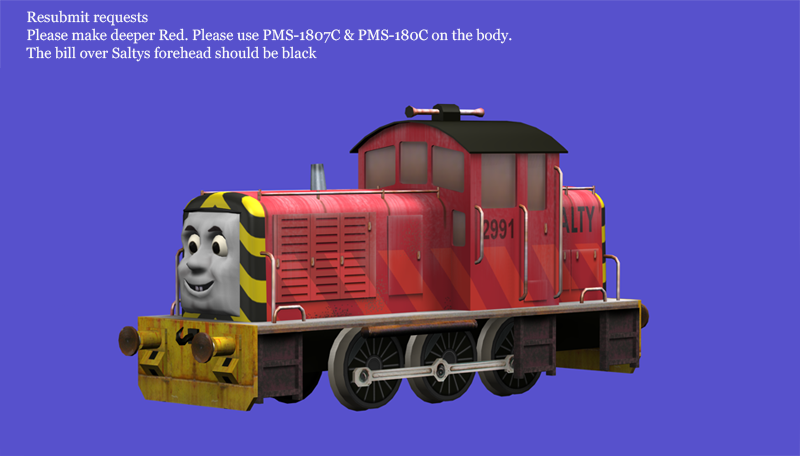
<style>
.page{position:relative;width:800px;height:456px;background:#5751cc}
.page>*{position:absolute;margin:0}
.t1{font:14.8px "Georgia";color:#fafafa}
</style>
<div class="page">
<p class="t1" style="left:26px;top:10px;width:486px;height:52px">Resubmit requests<br>Please make deeper Red. Please use PMS-1807C &amp; PMS-180C on the body.<br>The bill over Saltys forehead should be black</p>
</div>
